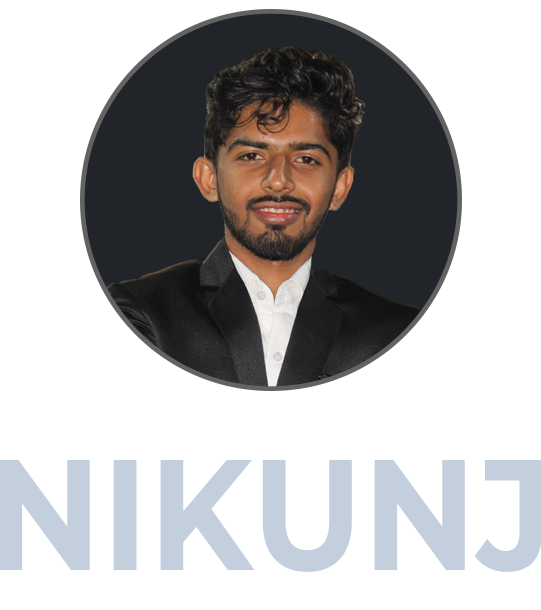
<style>
.page{position:relative;width:541px;height:610px;background:#ffffff}
.page>*{position:absolute;margin:0}
.t1{font:157.1px "Montserrat-Bold";letter-spacing:0.005em;color:#c4cfde;text-transform:uppercase;scale:0.89 1}
</style>
<div class="page">
<p class="t1" style="left:0px;top:460px;width:543px;height:112px">nikunj</p>
</div>
